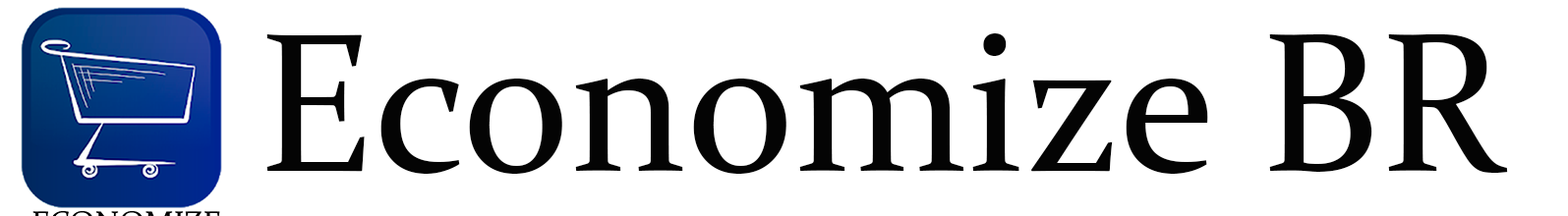
<style>
.page{position:relative;width:1568px;height:216px;background:#ffffff}
.page>*{position:absolute;margin:0}
.t1{font:199.9px "Constantia";color:#040404}
</style>
<div class="page">
<p class="t1" style="left:266px;top:33px;width:1242px;height:141px">Economize BR</p>
</div>
